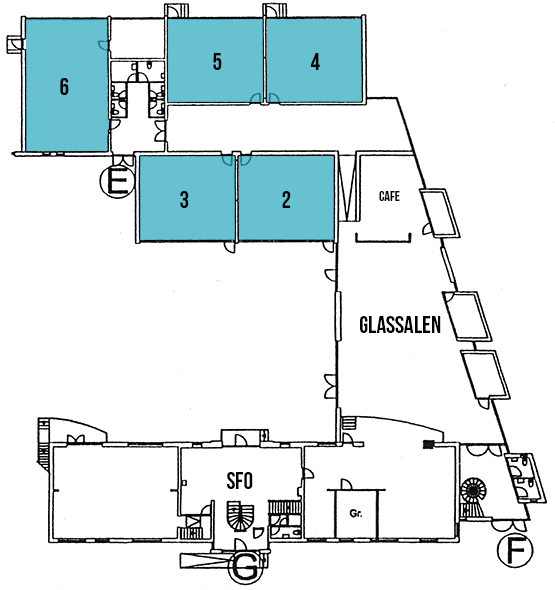
<style>
.page{position:relative;width:555px;height:590px;background:#ffffff}
.page>*{position:absolute;margin:0}
.t1{font:24px "BebasNeueBold";color:#000000}
.t2{font:14px "BebasNeueBold";color:#000000}
.t3{font:24px "BebasNeue";color:#000000}
</style>
<div class="page">
<p class="t1" style="left:213px;top:53px;width:9px;height:17px">5</p>
<p class="t1" style="left:310px;top:53px;width:10px;height:17px">4</p>
<p class="t1" style="left:60px;top:78px;width:9px;height:17px">6</p>
<p class="t1" style="left:180px;top:191px;width:9px;height:17px">3</p>
<p class="t1" style="left:282px;top:191px;width:9px;height:17px">2</p>
<p class="t2" style="left:379px;top:191px;width:21px;height:10px">Cafe</p>
<p class="t3" style="left:360px;top:316px;width:81px;height:17px">Glassalen</p>
<p class="t1" style="left:227px;top:472px;width:26px;height:17px">SFO</p>
</div>
